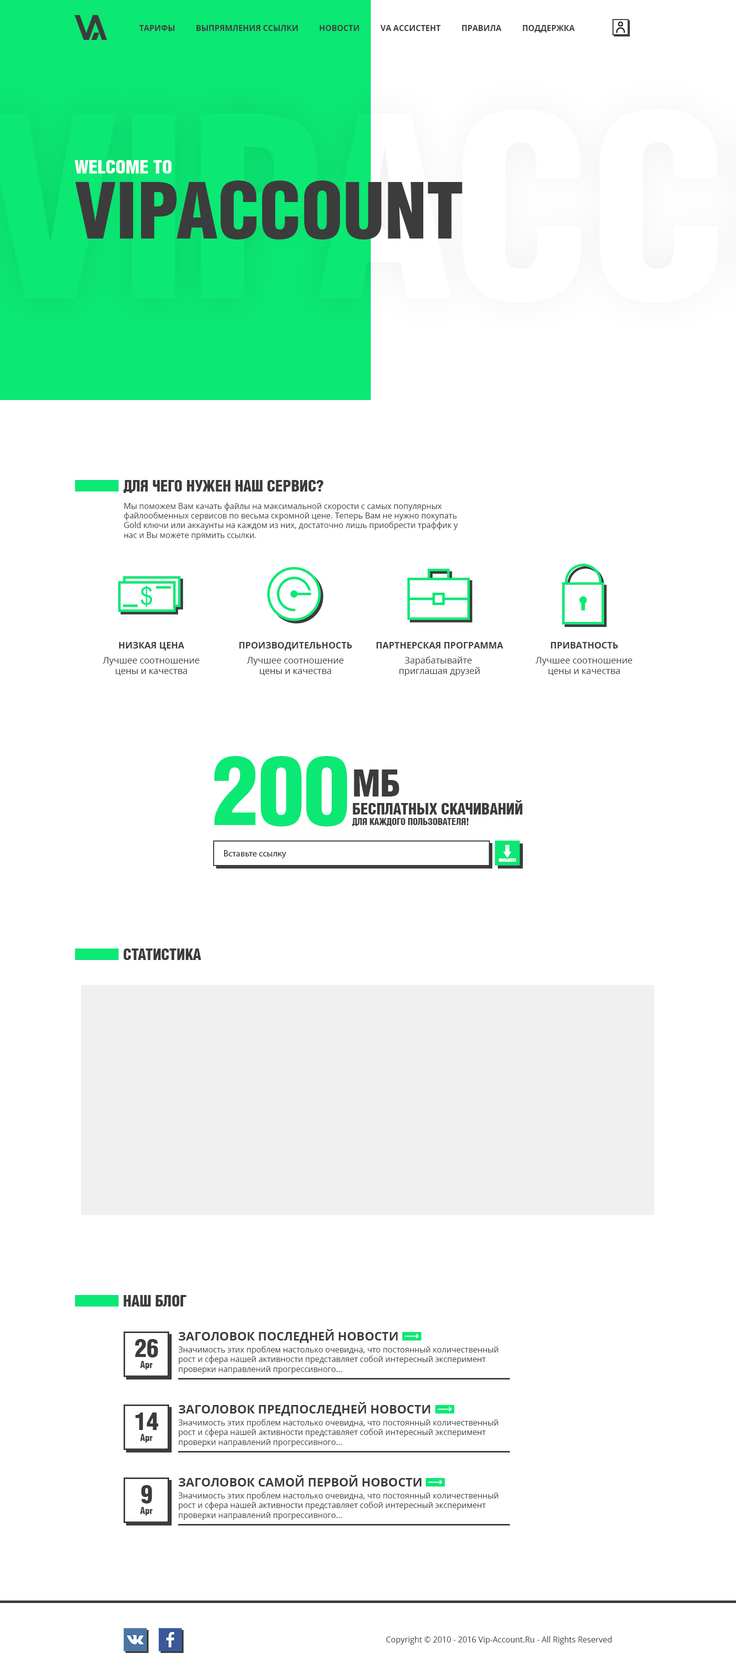
<style>
.page{position:relative;width:736px;height:1678px;background:#ffffff}
.page>*{position:absolute;margin:0}
.t1{font:8px "OpenSans-Bold";color:#3c3c3c}
.t2{font:18px/65px "AGLettericaCondensedLight-Bold";color:#ffffff}
.t3{font:75px/65px "AGLettericaCondensedLight-Bold";color:#3c3c3c}
.t4{font:15px "AGLettericaCondensedLight-Bold";color:#3c3c3c}
.t5{font:8px "OpenSans";color:#3c3c3c}
.t6{font:9px "OpenSans";color:#3c3c3c}
.t7{font:9px "OpenSans-Bold";color:#3c3c3c}
.t8{font:9px/15px "OpenSans-Bold";color:#3c3c3c}
.t9{font:9px/15px "OpenSans";color:#3c3c3c}
.t10{font:91.8px "AGLettericaCondensedLight-Bold";color:#0be974}
.t11{font:9px "AGLettericaCondensedLight-Bold";color:#3c3c3c}
.t12{font:36px "AGLettericaCondensedLight-Bold";color:#3c3c3c}
.t13{font:9px "MyriadPro-Regular";color:#3c3c3c}
.t14{font:12px "OpenSans-Bold";color:#3c3c3c}
.t15{font:12px/12px "OpenSans-Bold";color:#3c3c3c}
.t16{font:8px/12px "OpenSans";color:#3c3c3c}
.t17{font:24px "AGLettericaCondensedLight-Bold";color:#3c3c3c}
</style>
<div class="page">
<p class="t1" style="left:139px;top:25px;width:436px;height:8px">ТАРИФЫ          ВЫПРЯМЛЕНИЯ ССЫЛКИ          НОВОСТИ          VA АССИСТЕНТ          ПРАВИЛА          ПОДДЕРЖКА</p>
<p class="t2" style="left:75px;top:160px;width:387px;height:80px">WELCOME TO<br><span class="t3">VIPACCOUNT</span></p>
<p class="t4" style="left:124px;top:480px;width:200px;height:13px">ДЛЯ ЧЕГО НУЖЕН НАШ СЕРВИС?</p>
<p class="t5" style="left:124px;top:503px;width:334px;height:37px">Мы поможем Вам качать файлы на максимальной скорости с самых популярных файлообменных сервисов по весьма скромной цене. Теперь Вам не нужно покупать Gold ключи или аккаунты на каждом из них, достаточно лишь приобрести траффик у нас и Вы можете прямить ссылки.</p>
<p class="t6" style="left:103px;top:642px;width:97px;height:34px;text-align:center"><span class="t7">НИЗКАЯ ЦЕН</span><span class="t8">А<br></span><span class="t9">Лу</span>чшее соотношение<br>цены и качества</p>
<p class="t6" style="left:239px;top:642px;width:113px;height:34px;text-align:center"><span class="t7">ПРОИЗВОДИТЕЛЬНОСТ</span><span class="t8">Ь<br></span><span class="t9">Лучш</span>ее соотношение<br>цены и качества</p>
<p class="t6" style="left:376px;top:642px;width:127px;height:34px;text-align:center"><span class="t7">ПАРТНЕРСКАЯ ПРОГРАММА<br></span><span class="t9">Зараба</span>тывайте <br>приглашая друзей</p>
<p class="t6" style="left:535px;top:642px;width:97px;height:34px;text-align:center"><span class="t7">ПРИВАТНОСТЬ<br></span><span class="t9">Лучш</span>ее соотношение<br>цены и качества</p>
<p class="t10" style="left:214px;top:756px;width:133px;height:71px">200</p>
<p class="t11" style="left:352px;top:770px;width:170px;height:56px"><span class="t12">МБ<br></span><span class="t4">БЕСПЛАТНЫХ СКАЧИВАНИЙ<br></span>ДЛЯ КАЖДОГО ПОЛЬЗОВАТЕЛЯ!</p>
<p class="t13" style="left:224px;top:850px;width:62px;height:9px">Вставьте ссылку</p>
<p class="t4" style="left:124px;top:949px;width:77px;height:11px">CТАТИСТИКА</p>
<p class="t4" style="left:124px;top:1295px;width:63px;height:12px">НАШ БЛОГ</p>
<p class="t5" style="left:178px;top:1329px;width:320px;height:45px"><span class="t14">ЗАГОЛОВОК ПОСЛЕДНЕЙ НОВОСТ</span><span class="t15">И<br></span><span class="t16">Зн</span>ачимость этих проблем настолько очевидна, что постоянный количественный рост и сфера нашей активности представляет собой интересный эксперимент проверки направлений прогрессивного...</p>
<p class="t11" style="left:135px;top:1339px;width:23px;height:31px;text-align:center"><span class="t17">26<br></span>Apr</p>
<p class="t5" style="left:178px;top:1402px;width:320px;height:45px"><span class="t14">ЗАГОЛОВОК ПРЕДПОСЛЕДНЕЙ НОВОСТ</span><span class="t15">И<br></span><span class="t16">Зн</span>ачимость этих проблем настолько очевидна, что постоянный количественный рост и сфера нашей активности представляет собой интересный эксперимент проверки направлений прогрессивного...</p>
<p class="t11" style="left:135px;top:1413px;width:24px;height:30px;text-align:center"><span class="t17">14<br></span>Apr</p>
<p class="t5" style="left:178px;top:1475px;width:320px;height:45px"><span class="t14">ЗАГОЛОВОК САМОЙ ПЕРВОЙ НОВОСТ</span><span class="t15">И<br></span><span class="t16">Зн</span>ачимость этих проблем настолько очевидна, что постоянный количественный рост и сфера нашей активности представляет собой интересный эксперимент проверки направлений прогрессивного...</p>
<p class="t11" style="left:140px;top:1485px;width:13px;height:31px;text-align:center"><span class="t17">9<br></span>Apr</p>
<p class="t5" style="left:386px;top:1636px;width:226px;height:9px">Copyright © 2010 - 2016 Vip-Account.Ru - All Rights Reserved</p>
</div>
